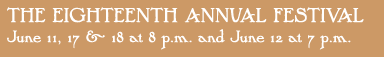
<style>
.page{position:relative;width:384px;height:57px;background:#cc9966}
.page>*{position:absolute;margin:0}
.t1{font:17.3px/20px "P22ArtsandCraftsHunter";letter-spacing:0.01em;color:#ffffff}
.t2{font:21.3px/20px "P22ArtsandCraftsHunter";letter-spacing:0.01em;color:#ffffff}
</style>
<div class="page">
<p class="t1" style="left:7px;top:7px;width:357px;height:43px"><span class="t2">THE EIGHTEENTH ANNUAL FESTIVAL<br></span>June 11, 17 &amp; 18 at 8 p.m. and June 12 at 7 p.m.</p>
</div>
